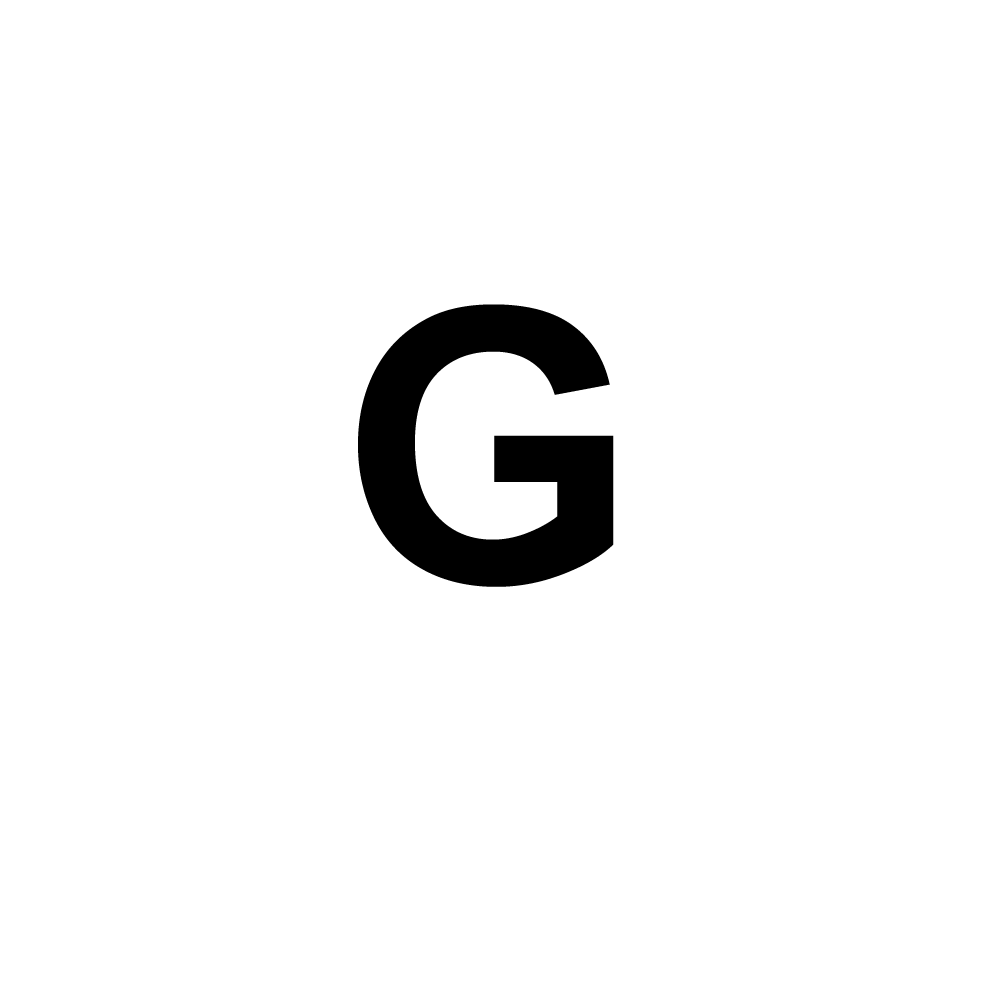
<style>
.page{position:relative;width:1000px;height:1000px;background:#ffffff}
.page>*{position:absolute;margin:0}
.t1{font:381px "Arial-BoldMT";color:#000000}
</style>
<div class="page">
<p class="t1" style="left:358px;top:304px;width:256px;height:283px">G</p>
</div>
